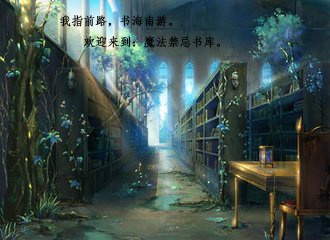
<style>
.page{position:relative;width:330px;height:240px}
.page>*{position:absolute;margin:0}
.t1{font:12px "·ÂËÎ";color:#070706;font-weight:bold}
</style>
<div class="page">
<p class="t1" style="left:60px;top:15px;width:161px;height:33px">我指前路，书海南游。<br>    欢迎来到：魔法禁忌书库。</p>
</div>
